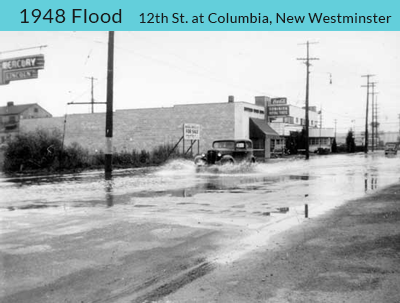
<style>
.page{position:relative;width:400px;height:303px}
.page>*{position:absolute;margin:0}
.t1{font:20px "Lato-Regular";letter-spacing:0.025em;color:#1a1a1a}
.t2{font:14px "Lato-Regular";letter-spacing:0.025em;color:#1a1a1a}
</style>
<div class="page">
<p class="t1" style="left:20px;top:9px;width:102px;height:14px">1948 Flood</p>
<p class="t2" style="left:139px;top:13px;width:253px;height:12px">12th St. at Columbia, New Westminster</p>
</div>
